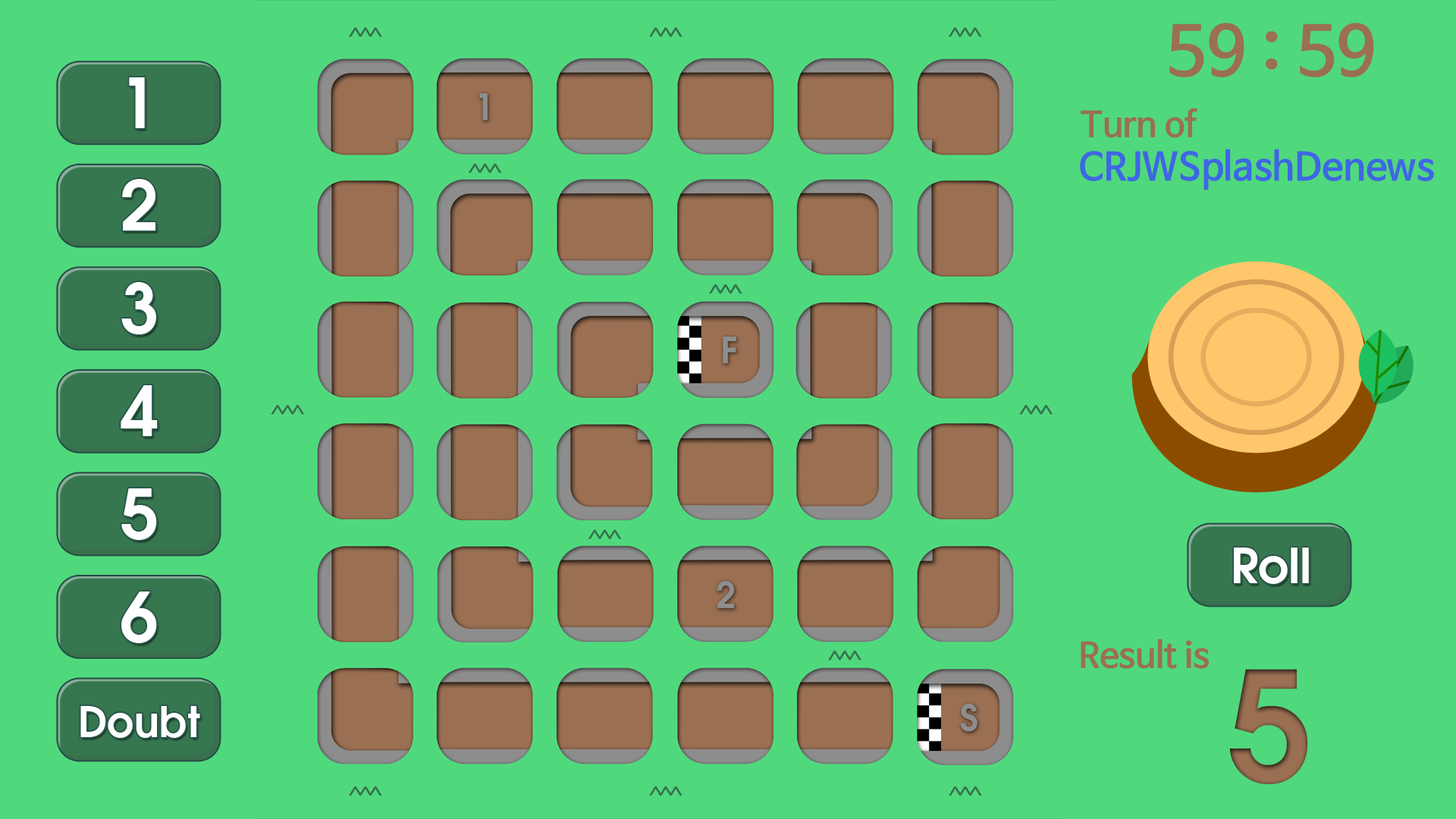
<style>
.page{position:relative;width:1456px;height:819px;background:#50d87d}
.page>*{position:absolute;margin:0}
.t1{font:68.2px "NanumBarunGothicOTFBold";color:#9a6f52}
.t2{font:68.2px "AvantGarde-Demi";color:#ffffff}
.t3{font:34.8px "NanumBarunGothicOTFBold";color:#9a6f52}
.t4{font:37.9px "NanumBarunGothicOTFBold";color:#3f66e4}
.t5{font:47.4px "AvantGarde-Demi";color:#ffffff}
.t6{font:151.7px "AvantGarde-Demi";color:#9a6f52}
.t7{font:41.9px "AvantGarde-Demi";color:#ffffff}
</style>
<div class="page">
<p class="t1" style="left:1169px;top:23px;width:205px;height:54px">59 : 59</p>
<p class="t2" style="left:129px;top:77px;width:16px;height:51px">1</p>
<p class="t3" style="left:1081px;top:108px;width:116px;height:30px">Turn of</p>
<p class="t4" style="left:1080px;top:149px;width:354px;height:41px">CRJWSplashDenews</p>
<p class="t2" style="left:122px;top:179px;width:33px;height:52px">2</p>
<p class="t2" style="left:121px;top:282px;width:35px;height:52px">3</p>
<p class="t2" style="left:121px;top:385px;width:37px;height:51px">4</p>
<p class="t2" style="left:121px;top:488px;width:36px;height:52px">5</p>
<p class="t5" style="left:1234px;top:548px;width:75px;height:36px">Roll</p>
<p class="t2" style="left:121px;top:591px;width:36px;height:52px">6</p>
<p class="t3" style="left:1081px;top:639px;width:128px;height:30px">Result is</p>
<p class="t6" style="left:1229px;top:669px;width:79px;height:115px">5</p>
<p class="t7" style="left:80px;top:706px;width:120px;height:32px">Doubt</p>
</div>
